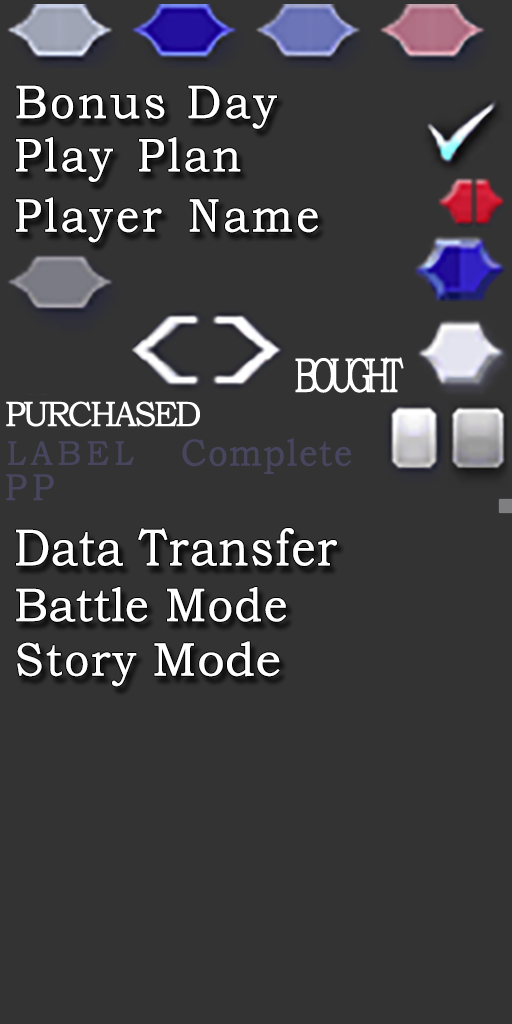
<style>
.page{position:relative;width:512px;height:1024px;background:#333333}
.page>*{position:absolute;margin:0}
.t1{font:47.1px "BookmanOldStyle";letter-spacing:0.05em;color:#ffffff;font-weight:bold;scale:0.93 1}
.t2{font:48.8px "BookmanOldStyle";letter-spacing:-0.24em;color:#ffffff;font-weight:bold;scale:0.64 1}
.t3{font:35.2px "BookmanOldStyle";letter-spacing:-0.1em;color:#ffffff;font-weight:bold;scale:0.94 1}
.t4{font:37.6px "BookmanOldStyle";letter-spacing:0.025em;color:#47465e;font-weight:bold;scale:0.92 1}
.t5{font:34px "BookmanOldStyle";letter-spacing:0.14em;color:#47465e;font-weight:bold;scale:0.93 1}
.t6{font:37.6px "BookmanOldStyle";letter-spacing:0.14em;color:#47465e;font-weight:bold;scale:0.92 1}
.t7{font:51.7px "BookmanOldStyle";letter-spacing:0.01em;color:#ffffff;font-weight:bold;scale:0.88 1}
.t8{font:51.7px "BookmanOldStyle";letter-spacing:-0.01em;color:#ffffff;font-weight:bold;scale:0.88 1}
.t9{font:47.1px "BookmanOldStyle";letter-spacing:-0.01em;color:#ffffff;font-weight:bold;scale:0.95 1}
.t10{font:47.1px "BookmanOldStyle";letter-spacing:0.01em;color:#ffffff;font-weight:bold;scale:0.95 1}
.t11{font:47.1px "BookmanOldStyle";letter-spacing:0.025em;color:#ffffff;font-weight:bold;scale:0.93 1}
.t12{font:47.1px "BookmanOldStyle";letter-spacing:-0.01em;color:#ffffff;font-weight:bold}
</style>
<div class="page">
<p class="t1" style="left:16px;top:85px;width:261px;height:44px">Bonus Day</p>
<p class="t1" style="left:16px;top:137px;width:225px;height:45px">Play Plan</p>
<p class="t1" style="left:16px;top:197px;width:302px;height:46px">Player Name</p>
<p class="t2" style="left:295px;top:357px;width:109px;height:36px">BOUGHT</p>
<p class="t3" style="left:6px;top:401px;width:194px;height:26px">PURCHASED</p>
<p class="t4" style="left:182px;top:438px;width:169px;height:36px">Complete</p>
<p class="t5" style="left:8px;top:441px;width:126px;height:24px">LABEL</p>
<p class="t6" style="left:6px;top:474px;width:48px;height:27px">PP</p>
<p class="t7" style="left:16px;top:528px;width:321px;height:38px"><span class="t8">Data </span>Transfer</p>
<p class="t9" style="left:16px;top:587px;width:270px;height:35px">Battle <span class="t10">Mode</span></p>
<p class="t11" style="left:17px;top:641px;width:263px;height:46px">Story <span class="t12">Mode</span></p>
</div>
